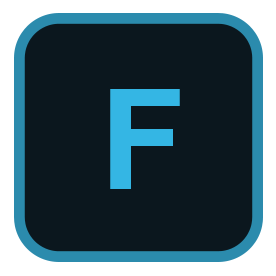
<style>
.page{position:relative;width:276px;height:276px;background:#0b171e}
.page>*{position:absolute;margin:0}
.t1{font:140.5px "Arial-BoldMT";color:#34b6e4}
</style>
<div class="page">
<p class="t1" style="left:110px;top:89px;width:70px;height:100px">F</p>
</div>
